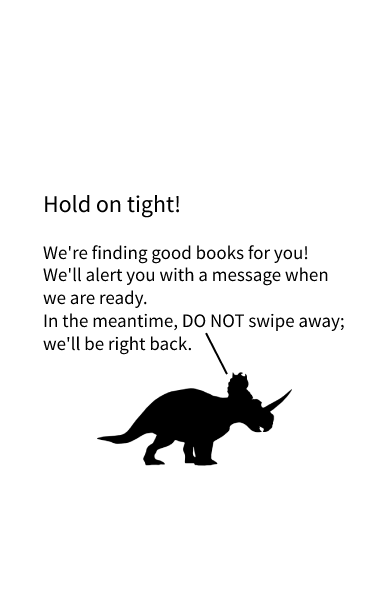
<style>
.page{position:relative;width:390px;height:609px;background:#ffffff}
.page>*{position:absolute;margin:0}
.t1{font:24px "SourceSansPro-Regular";color:#000000}
.t2{font:19px "SourceSansPro-Regular";color:#000000}
</style>
<div class="page">
<p class="t1" style="left:45px;top:194px;width:135px;height:24px">Hold on tight!</p>
<p class="t2" style="left:43px;top:245px;width:301px;height:110px">We're finding good books for you! We'll alert you with a message when we are ready.<br>In the meantime, DO NOT swipe away; we'll be right back.</p>
</div>
